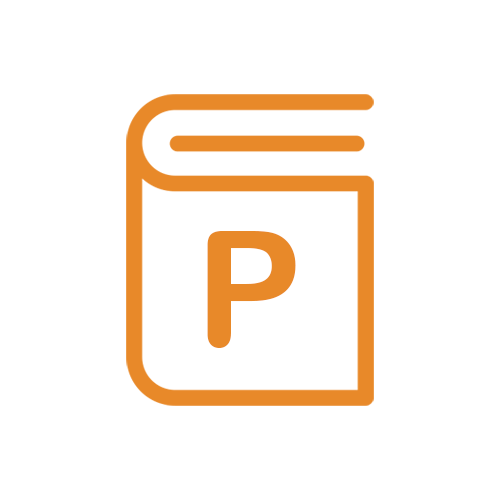
<style>
.page{position:relative;width:500px;height:500px;background:#ffffff}
.page>*{position:absolute;margin:0}
.t1{font:161.2px "ArialRoundedMTBold";letter-spacing:0.01em;color:#e88929;text-transform:uppercase}
</style>
<div class="page">
<p class="t1" style="left:207px;top:231px;width:89px;height:117px">p</p>
</div>
